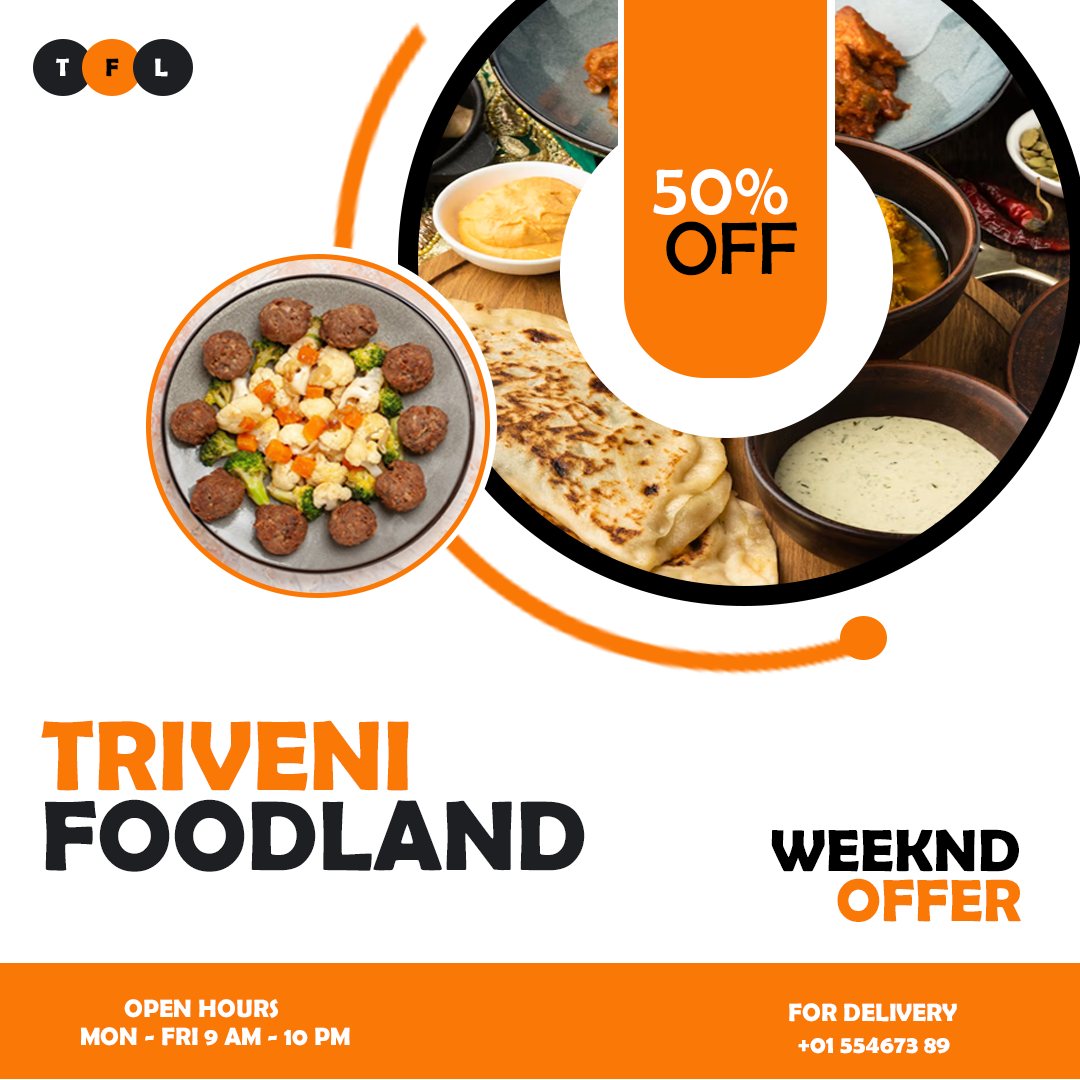
<style>
.page{position:relative;width:1080px;height:1080px;background:#ffffff}
.page>*{position:absolute;margin:0}
.t1{font:25px "BerlinSansFBDemi-Bold";color:#ffffff}
.t2{font:25px "BerlinSansFBDemi-Bold";color:#000000}
.t3{font:75px/60px "BerlinSansFB-Reg";color:#ffffff}
.t4{font:75px/60px "BerlinSansFB-Reg";color:#000000}
.t5{font:100px/80px "BerlinSansFBDemi-Bold";color:#1e1f22}
.t6{font:100px/80px "BerlinSansFBDemi-Bold";color:#fa7806}
.t7{font:60px/50px "BerlinSansFBDemi-Bold";color:#000000}
.t8{font:60px/50px "BerlinSansFBDemi-Bold";color:#fa7806}
</style>
<div class="page">
<p class="t1" style="left:56px;top:58px;width:13px;height:18px">T</p>
<p class="t2" style="left:106px;top:58px;width:13px;height:19px">F</p>
<p class="t1" style="left:155px;top:58px;width:13px;height:19px">L</p>
<p class="t3" style="left:653px;top:168px;width:144px;height:108px;text-align:center">50% <br><span class="t4">OFF</span></p>
<p class="t5" style="left:41px;top:720px;width:544px;height:152px"><span class="t6">TRIVENI<br></span>FOODLAND</p>
<p class="t7" style="left:771px;top:829px;width:250px;height:93px;text-align:right">WEEKND<br><span class="t8">OFFER</span></p>
<p class="t1" style="left:124px;top:999px;width:154px;height:19px">OPEN HOURS</p>
<p class="t1" style="left:789px;top:1003px;width:168px;height:19px">FOR DELIVERY</p>
<p class="t1" style="left:81px;top:1027px;width:269px;height:19px">MON - FRI 9 AM - 10 PM</p>
<p class="t1" style="left:798px;top:1037px;width:152px;height:17px">+01 554673 89</p>
</div>
